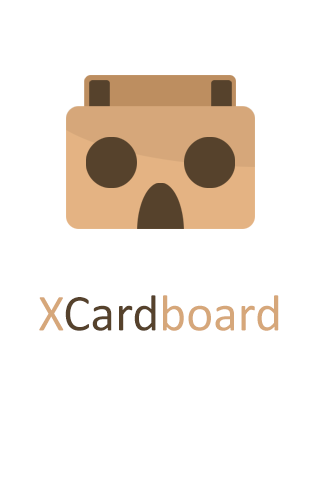
<style>
.page{position:relative;width:320px;height:480px;background:#ffffff}
.page>*{position:absolute;margin:0}
.t1{font:51.6px "Calibri";color:#d6a77a}
.t2{font:51.6px "Calibri";color:#56422c}
</style>
<div class="page">
<p class="t1" style="left:39px;top:295px;width:240px;height:36px">X<span class="t2">Card</span>board</p>
</div>
